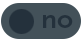
<style>
.page{position:relative;width:83px;height:40px;background:#435159}
.page>*{position:absolute;margin:0}
.t1{font:25.6px "MuseoSans-700";color:#24313c}
</style>
<div class="page">
<p class="t1" style="left:43px;top:15px;width:30px;height:13px">no</p>
</div>
